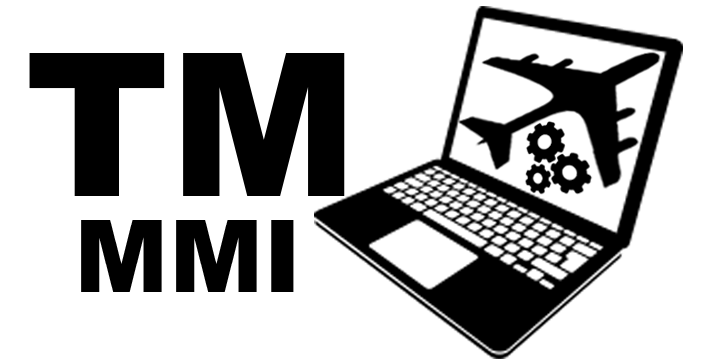
<style>
.page{position:relative;width:720px;height:360px;background:#ffffff}
.page>*{position:absolute;margin:0}
.t1{font:200px "Arial-Black";color:#000000}
.t2{font:100px "Arial-Black";color:#000000}
</style>
<div class="page">
<p class="t1" style="left:29px;top:53px;width:316px;height:143px">TM</p>
<p class="t2" style="left:81px;top:220px;width:213px;height:72px">MMI</p>
</div>
